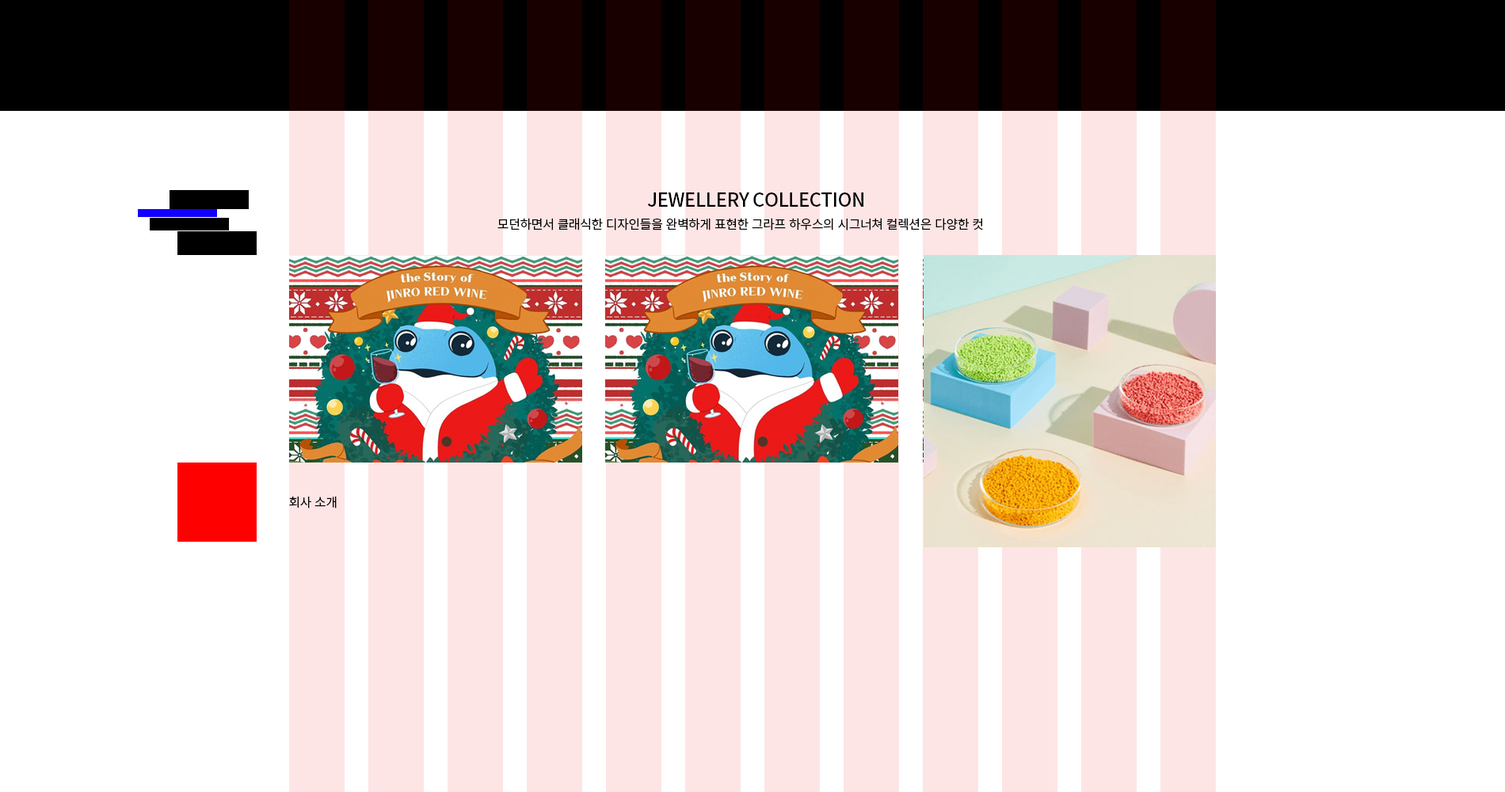
<style>
.page{position:relative;width:1505px;height:792px;background:#ffffff}
.page>*{position:absolute;margin:0}
.t1{font:19px "NotoSansKR-Medium";letter-spacing:-0.025em;color:#000000}
.t2{font:12.7px "NotoSansKR-Regular";letter-spacing:-0.025em;color:#000000}
</style>
<div class="page">
<p class="t1" style="left:647px;top:193px;width:217px;height:14px">JEWELLERY COLLECTION</p>
<p class="t2" style="left:498px;top:218px;width:485px;height:13px">모던하면서 클래식한 디자인들을 완벽하게 표현한 그라프 하우스의 시그너쳐 컬렉션은 다양한 컷</p>
<p class="t2" style="left:289px;top:496px;width:48px;height:13px">회사 소개</p>
</div>
